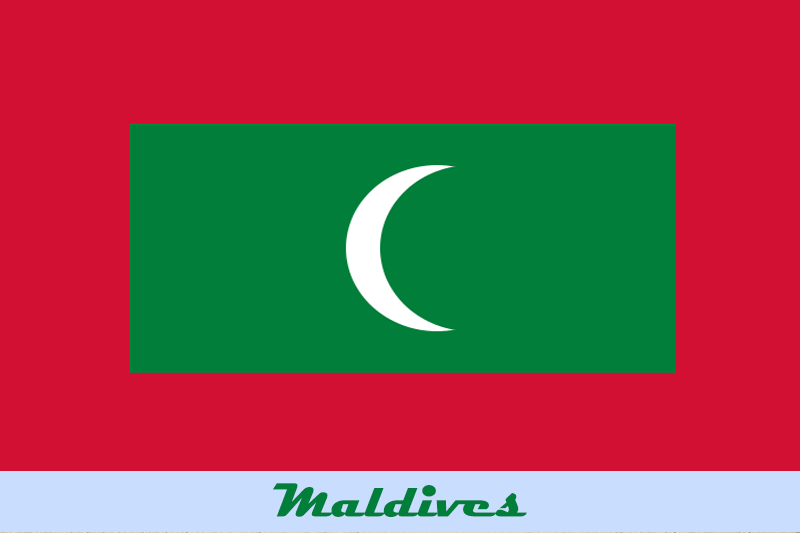
<style>
.page{position:relative;width:800px;height:533px;background:#d21034}
.page>*{position:absolute;margin:0}
.t1{font:48px "Magneto-Bold";color:#007e3a;scale:1.08 1}
</style>
<div class="page">
<p class="t1" style="left:273px;top:483px;width:254px;height:34px">Maldives</p>
</div>
